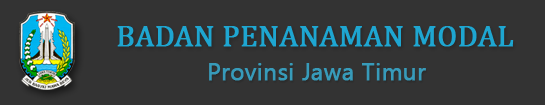
<style>
.page{position:relative;width:545px;height:105px;background:#333333}
.page>*{position:absolute;margin:0}
.t1{font:30px "Cambria";color:#1ea6d1;font-weight:bold}
.t2{font:24px "SegoeUISymbol";color:#379bba;font-weight:bold}
</style>
<div class="page">
<p class="t1" style="left:117px;top:26px;width:397px;height:21px">BADAN PENANAMAN MODAL</p>
<p class="t2" style="left:209px;top:63px;width:217px;height:18px">Provinsi Jawa Timur</p>
</div>
